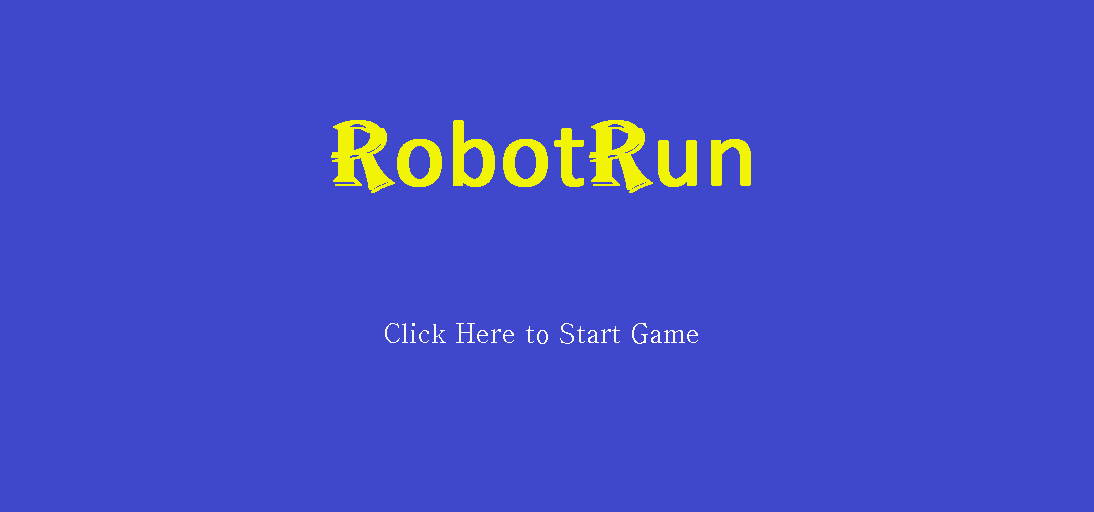
<style>
.page{position:relative;width:1094px;height:512px;background:#3f48cc}
.page>*{position:absolute;margin:0}
.t1{font:96px "Calibri";color:#f1f405;font-weight:bold}
.t2{font:96px "Algerian";color:#f1f405;font-weight:bold}
.t3{font:26.7px "HyhwpEQ";color:#fbf9f9}
</style>
<div class="page">
<p class="t1" style="left:331px;top:120px;width:420px;height:73px"><span class="t2">R</span>obot<span class="t2">R</span>un</p>
<p class="t3" style="left:385px;top:323px;width:313px;height:21px">Click Here to Start Game</p>
</div>
